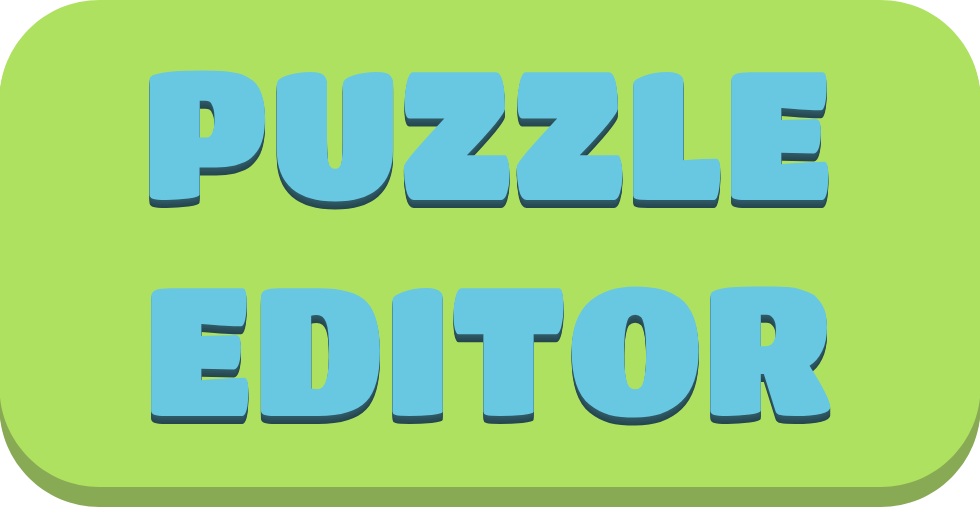
<style>
.page{position:relative;width:980px;height:508px;background:#afe160}
.page>*{position:absolute;margin:0}
.t1{font:180px "TitanOne";color:#69c8e1}
</style>
<div class="page">
<p class="t1" style="left:149px;top:70px;width:682px;height:348px;text-align:center">PUZZLE<br>EDITOR</p>
</div>
